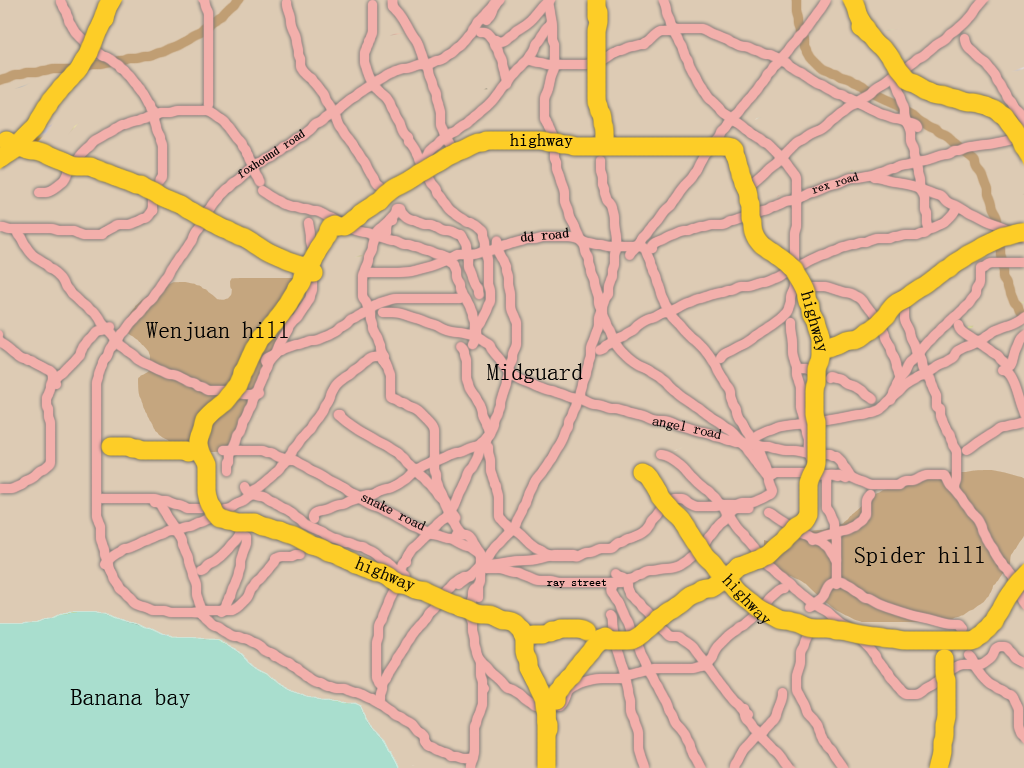
<style>
.page{position:relative;width:1024px;height:768px;background:#ddcbb4}
.page>*{position:absolute;margin:0}
.t1{font:12px "SimSun";color:#000000}
.t2{font:18px "SimSun";color:#000000}
.t3{font:12px "SimSun"}
.t4{font:14px "SimSun";color:#000000}
.t5{font:24px "SimSun";color:#000000}
</style>
<div class="page">
<p class="t1" style="left:238px;top:129px;width:67px;height:50px;rotate:-33deg">foxhound road</p>
<p class="t2" style="left:510px;top:133px;width:63px;height:15px">highway</p>
<p class="t3" style="left:812px;top:172px;width:47px;height:22px;rotate:-17deg">rex road</p>
<p class="t4" style="left:521px;top:227px;width:48px;height:15px;rotate:-6deg">dd road</p>
<p class="t2" style="left:801px;top:290px;width:25px;height:61px;rotate:74deg">highway</p>
<p class="t5" style="left:146px;top:321px;width:142px;height:20px">Wenjuan hill</p>
<p class="t5" style="left:487px;top:363px;width:96px;height:20px">Midguard</p>
<p class="t4" style="left:652px;top:419px;width:70px;height:20px;rotate:12deg">angel road</p>
<p class="t4" style="left:361px;top:495px;width:65px;height:36px;rotate:26deg">snake road</p>
<p class="t2" style="left:354px;top:556px;width:61px;height:36px;rotate:22deg">highway</p>
<p class="t5" style="left:855px;top:546px;width:129px;height:20px">Spider hill</p>
<p class="t1" style="left:547px;top:579px;width:60px;height:9px">ray street</p>
<p class="t2" style="left:721px;top:573px;width:49px;height:51px;rotate:47deg">highway</p>
<p class="t5" style="left:70px;top:688px;width:120px;height:20px">Banana bay</p>
</div>
